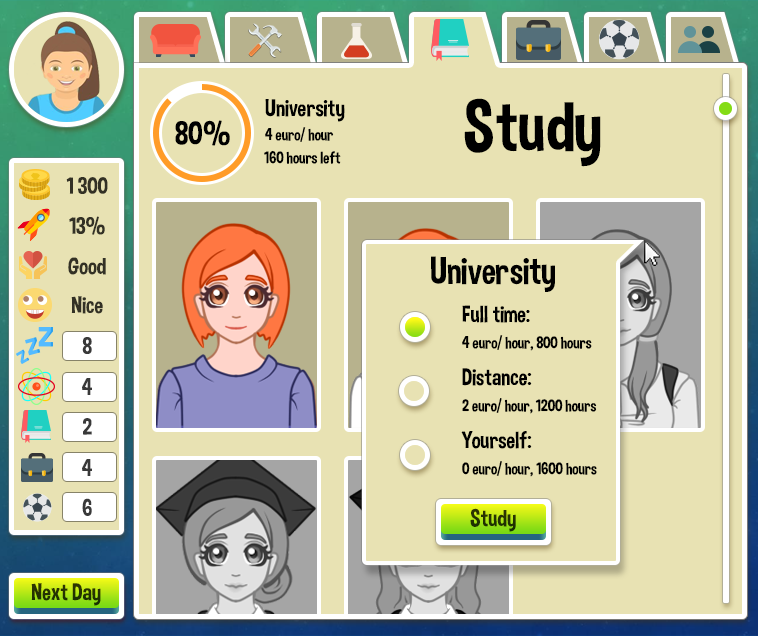
<style>
.page{position:relative;width:758px;height:636px;background:#e8e2b3}
.page>*{position:absolute;margin:0}
.t1{font:24px "DimboRegular";color:#000000}
.t2{font:71px "DimboRegular";color:#000000}
.t3{font:33px "DimboRegular";color:#000000}
.t4{font:16.6px "DimboRegular";color:#000000}
.t5{font:23.6px "DimboRegular";color:#333125}
.t6{font:38px "DimboRegular";color:#000000}
.t7{font:23.6px "DimboRegular";color:#000000}
.t8{font:23.6px "DimboRegular";color:#393939}
.t9{font:23.6px "DimboRegular";color:#243202}
</style>
<div class="page">
<p class="t1" style="left:265px;top:99px;width:80px;height:23px">University</p>
<p class="t2" style="left:464px;top:98px;width:137px;height:69px">Study</p>
<p class="t3" style="left:175px;top:120px;width:55px;height:26px">80%</p>
<p class="t3" style="left:175px;top:120px;width:55px;height:26px">80%</p>
<p class="t4" style="left:265px;top:127px;width:69px;height:15px">4 euro/ hour</p>
<p class="t4" style="left:264px;top:150px;width:77px;height:14px">160 hours left</p>
<p class="t5" style="left:66px;top:177px;width:42px;height:17px">1 300</p>
<p class="t5" style="left:69px;top:216px;width:36px;height:19px">13%</p>
<p class="t5" style="left:68px;top:257px;width:38px;height:18px">Good</p>
<p class="t6" style="left:431px;top:256px;width:124px;height:36px">University</p>
<p class="t5" style="left:71px;top:296px;width:32px;height:18px">Nice</p>
<p class="t7" style="left:462px;top:305px;width:68px;height:18px">Full time:</p>
<p class="t8" style="left:82px;top:337px;width:10px;height:17px">8</p>
<p class="t4" style="left:462px;top:335px;width:130px;height:16px">4 euro/ hour, 800 hours</p>
<p class="t7" style="left:462px;top:368px;width:70px;height:18px">Distance:</p>
<p class="t8" style="left:82px;top:378px;width:10px;height:17px">4</p>
<p class="t4" style="left:462px;top:398px;width:135px;height:16px">2 euro/ hour, 1200 hours</p>
<p class="t8" style="left:83px;top:418px;width:9px;height:17px">2</p>
<p class="t7" style="left:461px;top:431px;width:71px;height:18px">Yourself:</p>
<p class="t8" style="left:82px;top:459px;width:10px;height:17px">4</p>
<p class="t4" style="left:462px;top:461px;width:135px;height:16px">0 euro/ hour, 1600 hours</p>
<p class="t8" style="left:82px;top:498px;width:10px;height:18px">6</p>
<p class="t9" style="left:470px;top:508px;width:46px;height:24px">Study</p>
<p class="t9" style="left:31px;top:583px;width:70px;height:23px">Next Day</p>
</div>
